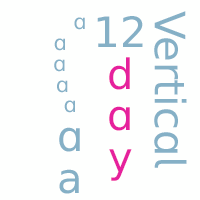
<style>
.page{position:relative;width:200px;height:200px;background:#fefffe}
.page>*{position:absolute;margin:0}
.t1{font:41.7px "DejaVuSans";color:#85b0c6}
.t2{font:20.8px "DejaVuSans";color:#85b0c6}
</style>
<div class="page">
<p class="t1" style="left:54px;top:11px;width:133px;height:183px">Vertical<br>12day<br><span class="t2">aaaaa</span>aa</p>
</div>
